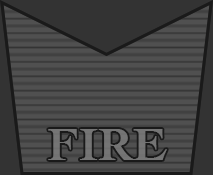
<style>
.page{position:relative;width:213px;height:175px;background:#505050}
.page>*{position:absolute;margin:0}
.t1{font:48px "Cochin-Bold";color:#757575}
</style>
<div class="page">
<p class="t1" style="left:48px;top:129px;width:119px;height:31px">FIRE</p>
</div>
